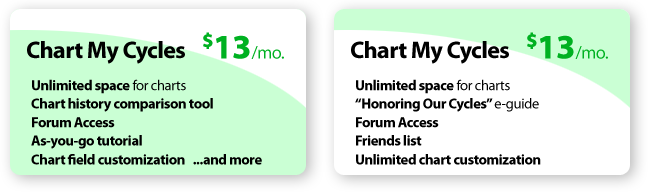
<style>
.page{position:relative;width:648px;height:194px;background:#ffffff}
.page>*{position:absolute;margin:0}
.t1{font:24px "MyriadPro-Bold";letter-spacing:-0.025em;color:#000000}
.t2{font:18px "MyriadPro-Regular";letter-spacing:-0.025em;color:#00b121}
.t3{font:34.4px "MyriadPro-Bold";letter-spacing:-0.025em;color:#00b121;font-weight:bold}
.t4{font:14.5px "MyriadPro-Bold";letter-spacing:-0.025em;color:#000000}
.t5{font:14.5px "MyriadPro-Regular";letter-spacing:-0.025em;color:#000000}
</style>
<div class="page">
<p class="t1" style="left:27px;top:41px;width:158px;height:23px">Chart My Cycles</p>
<p class="t2" style="left:203px;top:32px;width:81px;height:27px"><span class="t3">$13</span>/mo.</p>
<p class="t1" style="left:351px;top:41px;width:158px;height:23px">Chart My Cycles</p>
<p class="t2" style="left:527px;top:32px;width:81px;height:27px"><span class="t3">$13</span>/mo.</p>
<p class="t4" style="left:32px;top:79px;width:154px;height:15px">Unlimited space<span class="t5"> for charts</span></p>
<p class="t4" style="left:356px;top:79px;width:154px;height:15px">Unlimited space<span class="t5"> for charts</span></p>
<p class="t4" style="left:31px;top:98px;width:182px;height:14px">Chart history comparison tool</p>
<p class="t4" style="left:355px;top:98px;width:184px;height:14px">“Honoring Our Cycles” <span class="t5">e-guide</span></p>
<p class="t4" style="left:32px;top:117px;width:83px;height:11px">Forum Access</p>
<p class="t4" style="left:356px;top:117px;width:83px;height:11px">Forum Access</p>
<p class="t4" style="left:31px;top:135px;width:111px;height:14px">As-you-go tutorial</p>
<p class="t4" style="left:356px;top:135px;width:66px;height:11px">Friends list</p>
<p class="t4" style="left:31px;top:154px;width:231px;height:11px">Chart field customization   ...and more</p>
<p class="t4" style="left:356px;top:154px;width:185px;height:11px">Unlimited chart customization</p>
</div>
